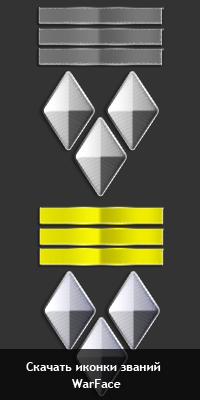
<style>
.page{position:relative;width:200px;height:400px;background:#333333}
.page>*{position:absolute;margin:0}
.t1{font:12px "TrebuchetMS-Bold";color:#ffffff}
</style>
<div class="page">
<p class="t1" style="left:26px;top:362px;width:135px;height:9px">Скачать иконки званий</p>
<p class="t1" style="left:72px;top:379px;width:49px;height:9px">WarFace</p>
</div>
